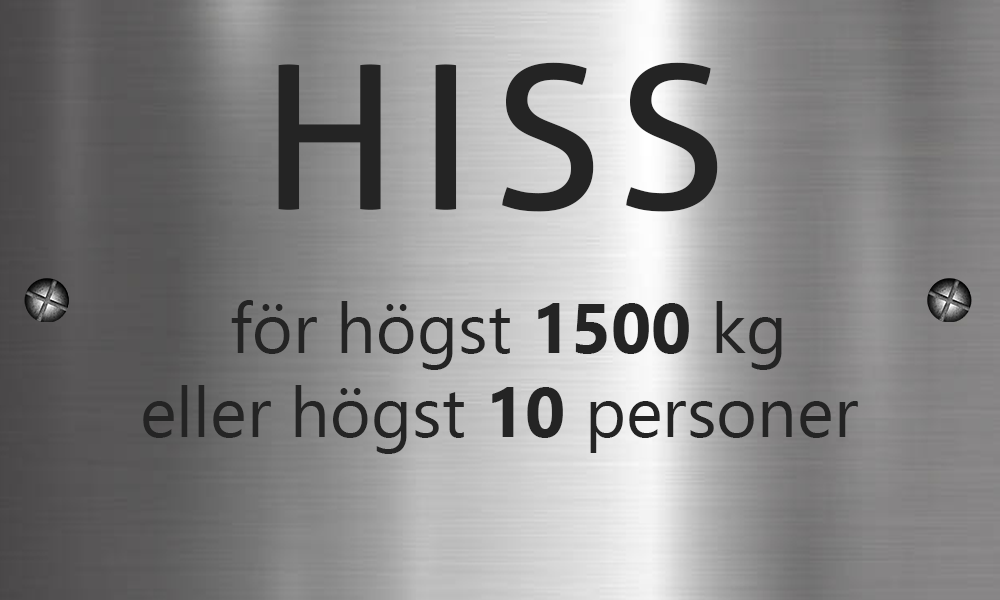
<style>
.page{position:relative;width:1000px;height:600px}
.page>*{position:absolute;margin:0}
.t1{font:200px "Aller-Regular";letter-spacing:0.1em;color:#242424}
.t2{font:70px "Ebrima";color:#242424}
.t3{font:70px "Ebrima-Bold";color:#242424}
</style>
<div class="page">
<p class="t1" style="left:278px;top:62px;width:440px;height:150px">HISS</p>
<p class="t2" style="left:143px;top:300px;width:715px;height:154px;text-align:center">för högst <span class="t3">1500</span> kg<br>eller högst <span class="t3">10</span> personer</p>
</div>
